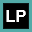
<style>
.page{position:relative;width:32px;height:32px;background:#000000}
.page>*{position:absolute;margin:0}
.t1{font:16px "Arial-BoldMT";color:#ffffff;text-transform:uppercase}
</style>
<div class="page">
<p class="t1" style="left:6px;top:10px;width:20px;height:12px">LP</p>
</div>
